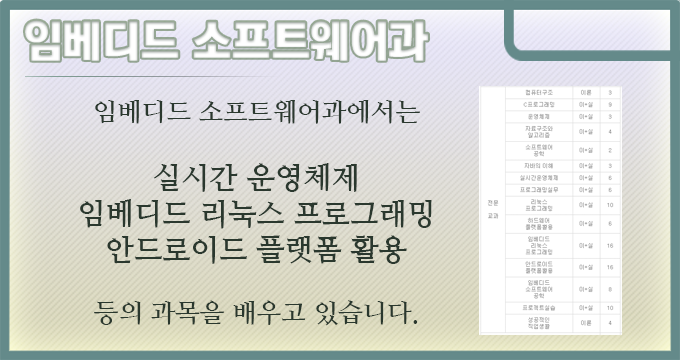
<style>
.page{position:relative;width:680px;height:360px}
.page>*{position:absolute;margin:0}
.t1{font:44px "KoreanTITGD5-R";letter-spacing:-0.01em;color:#ffffff}
.t2{font:30px "NanumMyeongjoBold";letter-spacing:-0.01em;color:#2a382e}
.t3{font:26px "NanumMyeongjoBold";letter-spacing:-0.01em;color:#2a382e}
</style>
<div class="page">
<p class="t1" style="left:25px;top:20px;width:403px;height:41px">임베디드 소프트웨어과</p>
<p class="t2" style="left:80px;top:100px;width:352px;height:226px;text-align:center"><span class="t3">임베디드 소프트웨어과에서는<br> <br></span>실시간 운영체제<br>임베디드 리눅스 프로그래밍<br>안드로이드 플랫폼 활용<br><span class="t3"><br>등의 과목을 배우고 있습니다.</span></p>
</div>
